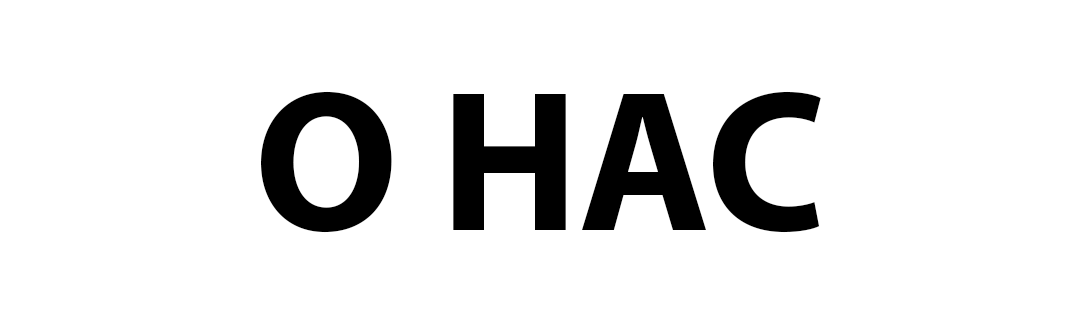
<style>
.page{position:relative;width:1078px;height:324px;background:#ffffff}
.page>*{position:absolute;margin:0}
.t1{font:201.6px "MyriadPro-Bold";color:#000000}
</style>
<div class="page">
<p class="t1" style="left:261px;top:91px;width:560px;height:142px">О НАС</p>
</div>
